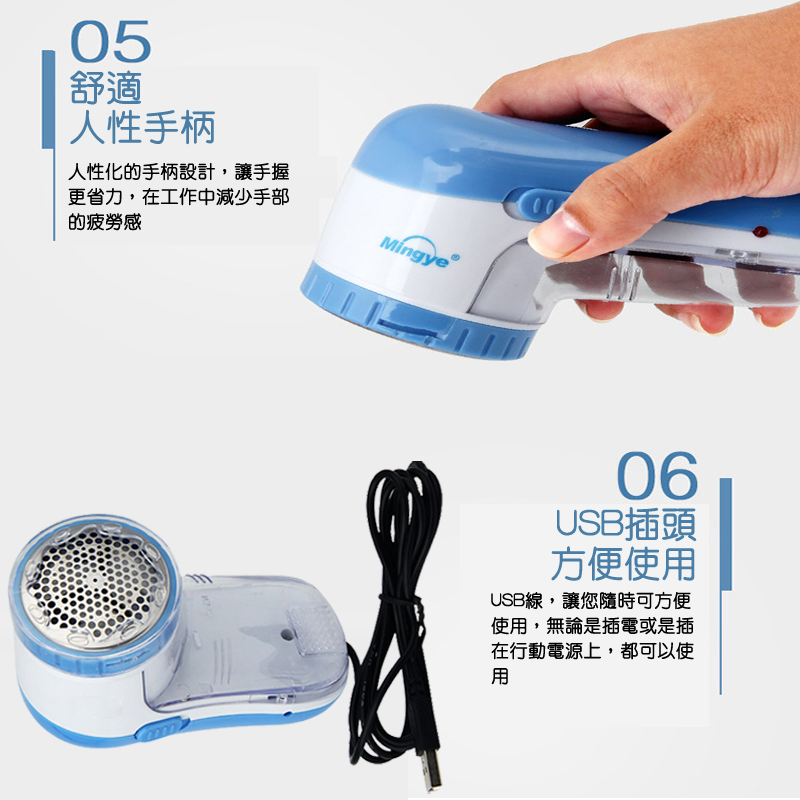
<style>
.page{position:relative;width:800px;height:800px;background:#ededed}
.page>*{position:absolute;margin:0}
.t1{font:36px "HanWangYenLight";color:#4a7ea6;font-weight:bold}
.t2{font:18px "HanWangYenLight";color:#000000;font-weight:bold}
</style>
<div class="page">
<p class="t1" style="left:70px;top:70px;width:145px;height:75px">舒適<br>人性手柄</p>
<p class="t2" style="left:68px;top:162px;width:221px;height:69px">人性化的手柄設計，讓手握<br>更省力，在工作中減少手部<br>的疲勞感</p>
<p class="t1" style="left:551px;top:507px;width:146px;height:74px;text-align:right">USB插頭<br>方便使用</p>
<p class="t2" style="left:491px;top:591px;width:203px;height:94px">USB線，讓您隨時可方便<br>使用，無論是插電或是插<br>在行動電源上，都可以使<br>用</p>
</div>
